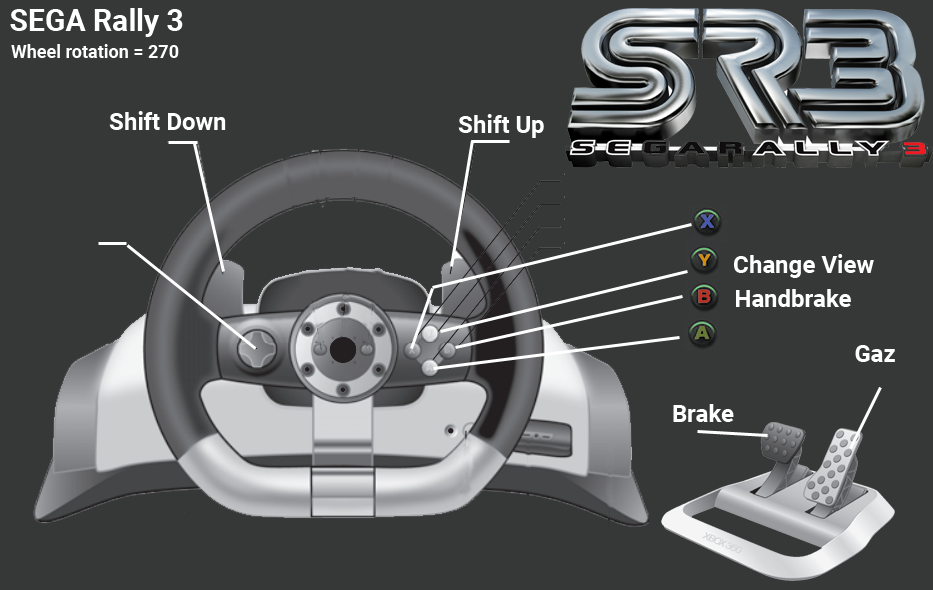
<style>
.page{position:relative;width:933px;height:590px;background:#363838}
.page>*{position:absolute;margin:0}
.t1{font:30px "Roboto-Bold";color:#ffffff}
.t2{font:18px "Roboto-Bold";color:#ffffff}
.t3{font:24px "Roboto-Bold";color:#ffffff}
</style>
<div class="page">
<p class="t1" style="left:10px;top:8px;width:173px;height:29px">SEGA Rally 3</p>
<p class="t2" style="left:11px;top:44px;width:168px;height:14px">Wheel rotation = 270</p>
<p class="t3" style="left:109px;top:111px;width:117px;height:19px">Shift Down</p>
<p class="t3" style="left:458px;top:114px;width:86px;height:24px">Shift Up</p>
<p class="t3" style="left:734px;top:254px;width:140px;height:24px">Change View</p>
<p class="t3" style="left:736px;top:289px;width:115px;height:18px">Handbrake</p>
<p class="t3" style="left:855px;top:345px;width:40px;height:17px">Gaz</p>
<p class="t3" style="left:673px;top:404px;width:61px;height:18px">Brake</p>
</div>
